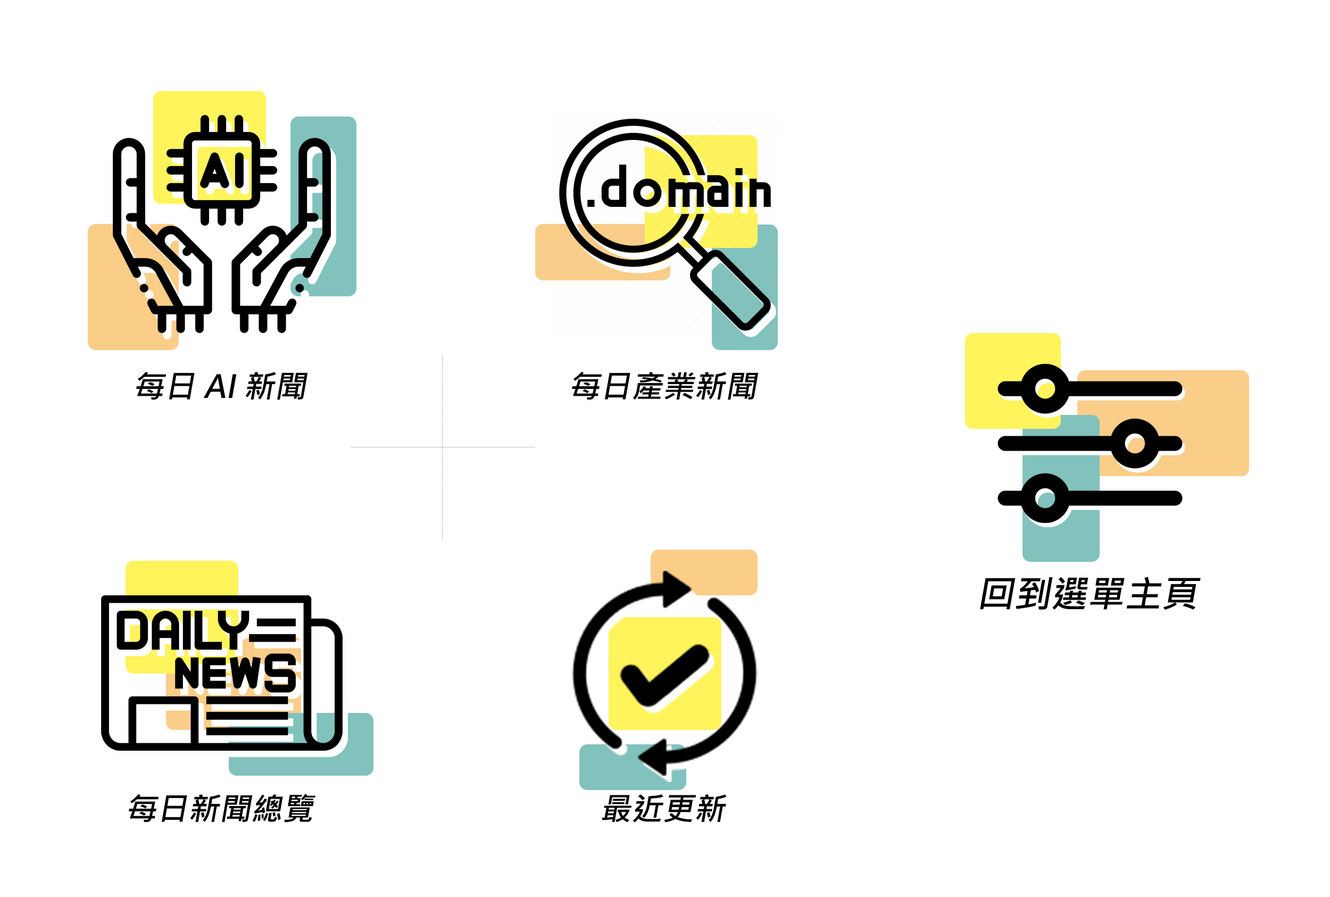
<style>
.page{position:relative;width:1330px;height:897px;background:#ffffff}
.page>*{position:absolute;margin:0}
.t1{font:31.4px "MicrosoftJhengHeiBold";color:#000000;font-style:italic}
.t2{font:36.8px "MicrosoftJhengHeiBold";color:#000000;font-style:italic}
</style>
<div class="page">
<p class="t1" style="left:136px;top:371px;width:172px;height:29px">每日 AI 新聞</p>
<p class="t1" style="left:572px;top:371px;width:186px;height:29px">每日產業新聞</p>
<p class="t2" style="left:980px;top:577px;width:220px;height:33px">回到選單主頁</p>
<p class="t1" style="left:129px;top:794px;width:186px;height:28px">每日新聞總覽</p>
<p class="t1" style="left:602px;top:794px;width:125px;height:28px">最近更新</p>
</div>
